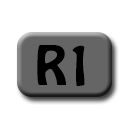
<style>
.page{position:relative;width:128px;height:128px;background:#ffffff}
.page>*{position:absolute;margin:0}
.t1{font:48px "HoboStd";color:#000000}
</style>
<div class="page">
<p class="t1" style="left:37px;top:45px;width:48px;height:41px">R1</p>
</div>
